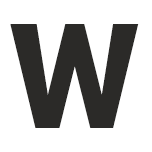
<style>
.page{position:relative;width:152px;height:152px;background:#ffffff}
.page>*{position:absolute;margin:0}
.t1{font:144px "Industry-Black";color:#2b2a28;text-transform:uppercase}
</style>
<div class="page">
<p class="t1" style="left:10px;top:24px;width:129px;height:104px">W</p>
</div>
